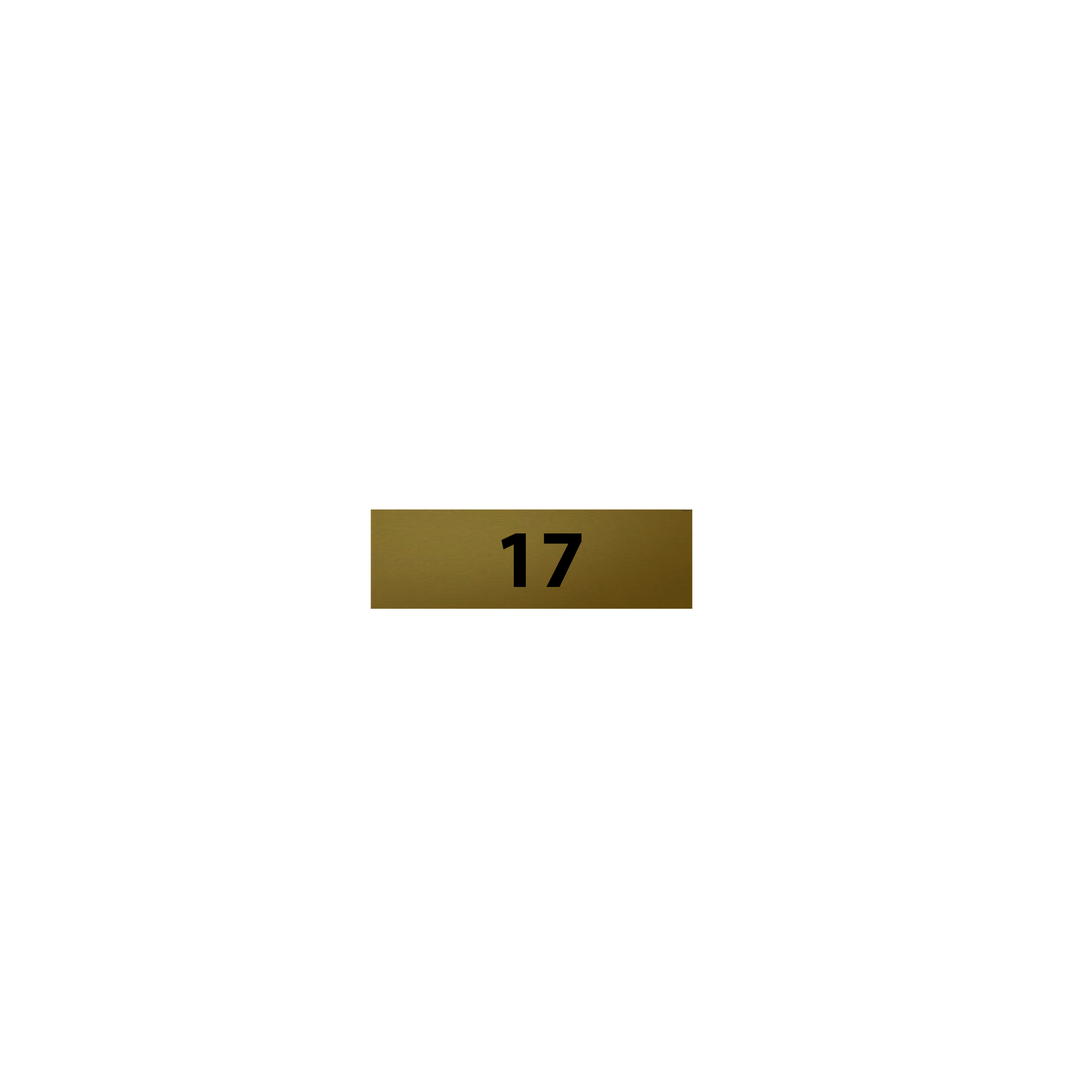
<style>
.page{position:relative;width:1092px;height:1092px;background:#ffffff}
.page>*{position:absolute;margin:0}
.t1{font:81.9px "MyriadPro-Bold";color:#000000}
</style>
<div class="page">
<p class="t1" style="left:501px;top:533px;width:80px;height:54px">17</p>
</div>
